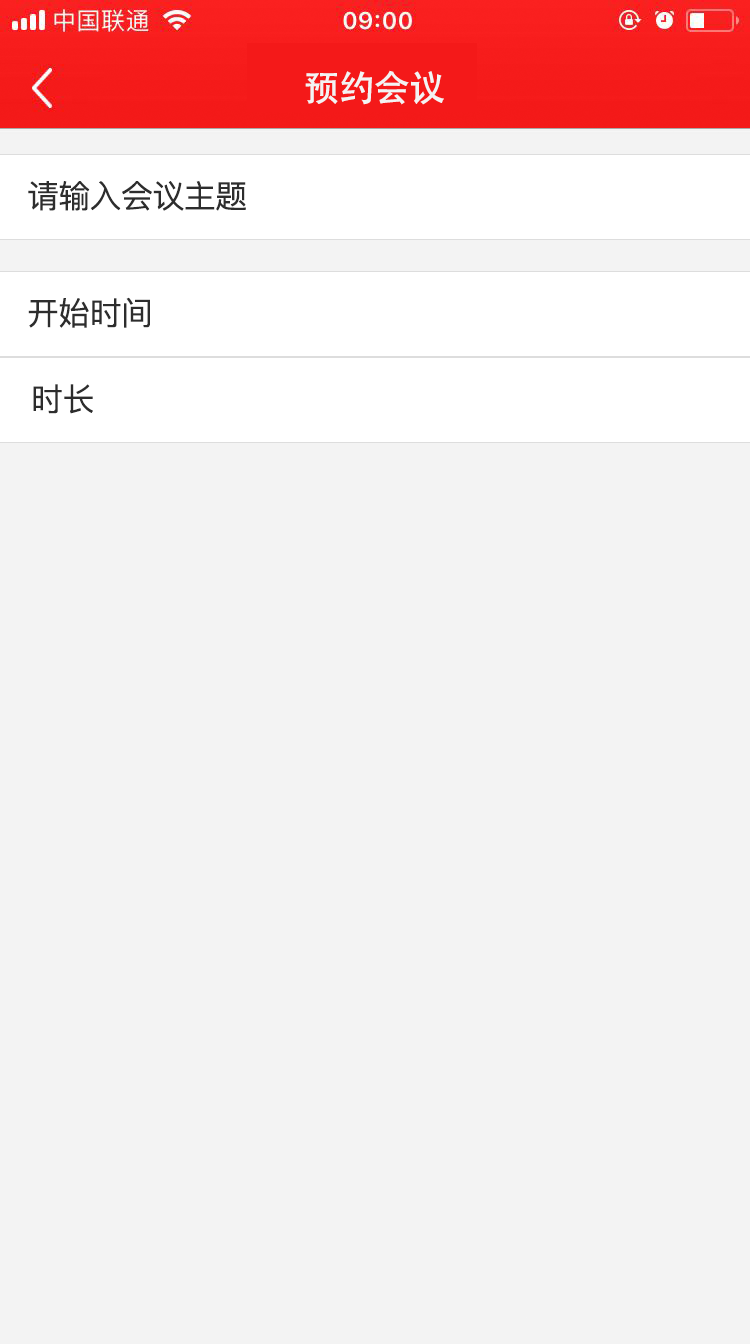
<style>
.page{position:relative;width:750px;height:1344px;background:#f3f3f3}
.page>*{position:absolute;margin:0}
.t1{font:36px "AdobeHeitiStd-Regular";letter-spacing:-0.02em;color:#f3f3f3}
.t2{font:32px "PingFangSC-Regular";letter-spacing:-0.02em;color:#2d2d2d}
</style>
<div class="page">
<p class="t1" style="left:305px;top:70px;width:139px;height:35px">预约会议</p>
<p class="t2" style="left:28px;top:181px;width:218px;height:30px">请输入会议主题</p>
<p class="t2" style="left:28px;top:297px;width:122px;height:31px">开始时间</p>
<p class="t2" style="left:33px;top:384px;width:60px;height:30px">时长</p>
</div>
